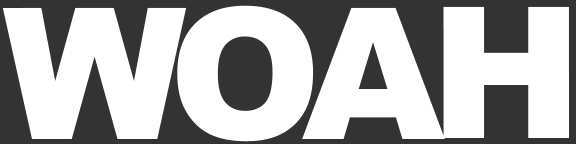
<style>
.page{position:relative;width:576px;height:144px;background:#ffffff}
.page>*{position:absolute;margin:0}
.t1{font:183.1px "Arial-Black";letter-spacing:-0.075em;color:#ffffff}
</style>
<div class="page">
<p class="t1" style="left:2px;top:5px;width:567px;height:137px">WOAH</p>
</div>
